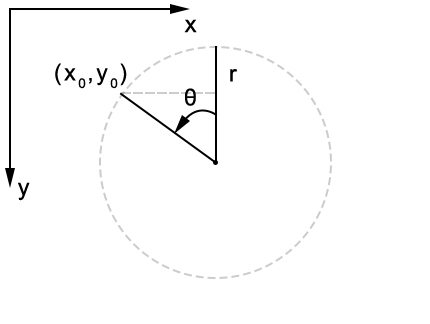
<style>
.page{position:relative;width:430px;height:324px;background:#ffffff}
.page>*{position:absolute;margin:0}
.t1{font:23.7px "ArialMT";letter-spacing:0.113em;color:#000000}
.t2{font:23px "ArialMT";letter-spacing:0.113em;color:#000000}
</style>
<div class="page">
<p class="t1" style="left:184px;top:19px;width:13px;height:14px">x</p>
<p class="t2" style="left:55px;top:63px;width:72px;height:26px">(x0,y0)</p>
<p class="t2" style="left:230px;top:69px;width:7px;height:13px">r</p>
<p class="t2" style="left:185px;top:88px;width:11px;height:18px">θ</p>
<p class="t1" style="left:18px;top:182px;width:12px;height:19px">y</p>
</div>
